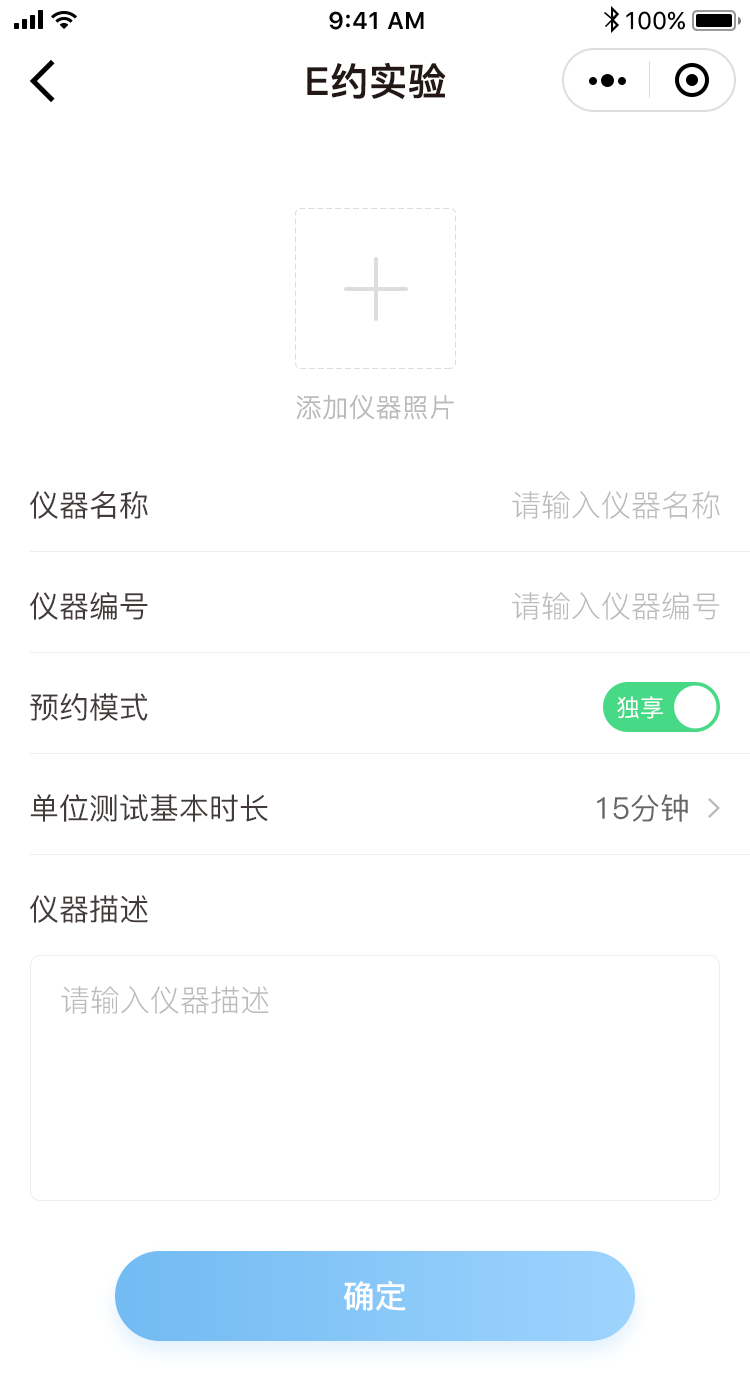
<style>
.page{position:relative;width:750px;height:1400px;background:#ffffff}
.page>*{position:absolute;margin:0}
.t1{font:38px "PingFang-SC-Bold";color:#231815;font-weight:bold}
.t2{font:26px "PingFang-SC-Regular";color:#bbbbbb;font-weight:bold}
.t3{font:30px "PingFang-SC-Medium";color:#433b39}
.t4{font:30px "PingFang-SC-Regular";color:#bbbbbb}
.t5{font:24px "PingFang-SC-Medium";color:#ffffff}
.t6{font:30px "PingFang-SC-Medium";color:#666666}
.t7{font:32px "PingFang-SC-Bold";color:#ffffff}
</style>
<div class="page">
<p class="t1" style="left:307px;top:62px;width:139px;height:38px">E约实验</p>
<p class="t2" style="left:296px;top:395px;width:158px;height:25px">添加仪器照片</p>
<p class="t3" style="left:30px;top:491px;width:118px;height:28px">仪器名称</p>
<p class="t4" style="left:512px;top:491px;width:208px;height:28px">请输入仪器名称</p>
<p class="t3" style="left:30px;top:592px;width:118px;height:28px">仪器编号</p>
<p class="t4" style="left:512px;top:592px;width:208px;height:28px">请输入仪器编号</p>
<p class="t3" style="left:30px;top:693px;width:118px;height:28px">预约模式</p>
<p class="t5" style="left:617px;top:696px;width:46px;height:23px">独享</p>
<p class="t3" style="left:30px;top:794px;width:238px;height:28px">单位测试基本时长</p>
<p class="t6" style="left:597px;top:794px;width:91px;height:28px">15分钟</p>
<p class="t3" style="left:30px;top:895px;width:118px;height:28px">仪器描述</p>
<p class="t4" style="left:61px;top:986px;width:208px;height:28px">请输入仪器描述</p>
<p class="t7" style="left:343px;top:1281px;width:63px;height:30px">确定</p>
</div>
